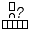
<style>
.page{position:relative;width:30px;height:30px;background:#ffffff}
.page>*{position:absolute;margin:0}
.t1{font:15px "HelveticaNeue-ThinItalic";color:#000000}
</style>
<div class="page">
<p class="t1" style="left:17px;top:7px;width:7px;height:11px">?</p>
</div>
